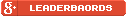
<style>
.page{position:relative;width:128px;height:16px;background:#df4930}
.page>*{position:absolute;margin:0}
.t1{font:7px "MegaMan-2";color:#ffffff}
</style>
<div class="page">
<p class="t1" style="left:30px;top:5px;width:82px;height:6px">Leaderbaords</p>
</div>
